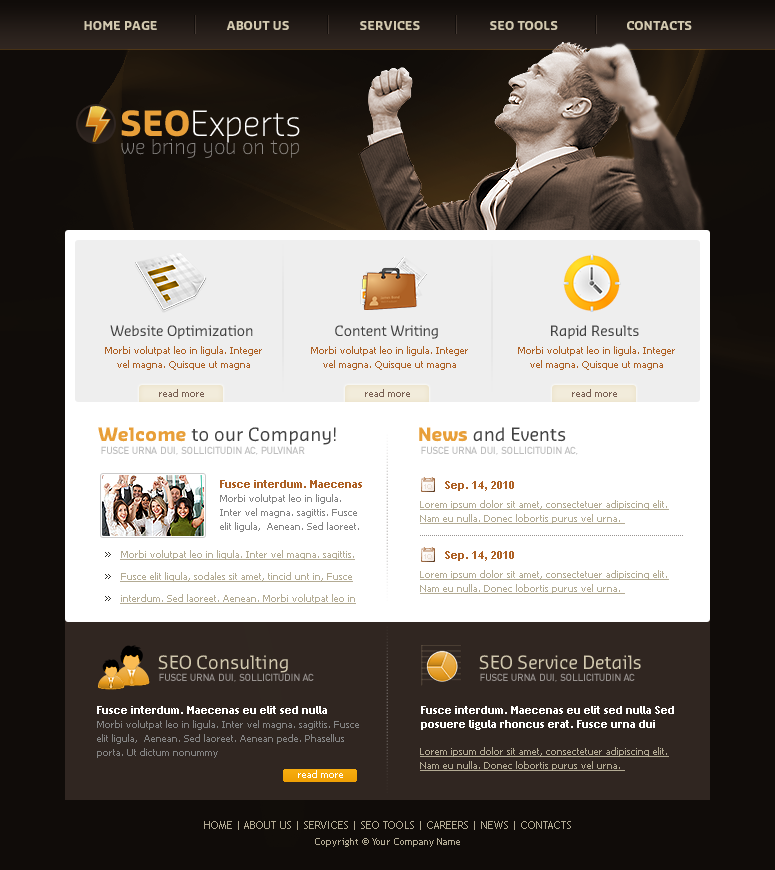
<style>
.page{position:relative;width:775px;height:870px;background:#ffffff}
.page>*{position:absolute;margin:0}
.t1{font:12px "Sansa-Bold";color:#d2c9af}
.t2{font:34px "Sansa-Light";color:#ffffff}
.t3{font:34px "Sansa-Bold";color:#e89f39}
.t4{font:20px "Sansa-Light";color:#8a8785}
.t5{font:14px "Sansa-Normal";color:#424242}
.t6{font:10px/14px "Tahoma";color:#ae6125}
.t7{font:10px "Tahoma";color:#7a6154}
.t8{font:18px "Sansa-Normal";color:#424242}
.t9{font:18px "Sansa-Bold";color:#e89f39}
.t10{font:10px "DINMittelschriftStd";color:#bdbdbd;text-transform:uppercase}
.t11{font:10px/14px "Tahoma";color:#848484}
.t12{font:11px/14px "TrebuchetMS-Bold";color:#ae6125}
.t13{font:11px "TrebuchetMS-Bold";color:#ae6125}
.t14{font:10px/14px "Tahoma";color:#b3ab94;text-decoration:underline}
.t15{font:10px/22px "Tahoma";color:#b3ab94;text-decoration:underline}
.t16{font:18px "Sansa-Normal";color:#d2c9af}
.t17{font:10px "DINMittelschriftStd";color:#989390;text-transform:uppercase}
.t18{font:11px/14px "TrebuchetMS-Bold";color:#ffffff}
.t19{font:10px "Tahoma";color:#ffffff}
.t20{font:11px/16px "TrebuchetMS";color:#b3ab94}
.t21{font:10px/16px "TrebuchetMS";color:#b3ab94}
</style>
<div class="page">
<p class="t1" style="left:84px;top:21px;width:73px;height:9px">HOME PAGE</p>
<p class="t1" style="left:226px;top:21px;width:63px;height:9px">ABOUT US</p>
<p class="t1" style="left:360px;top:21px;width:60px;height:9px">SERVICES</p>
<p class="t1" style="left:490px;top:21px;width:68px;height:9px">SEO TOOLS</p>
<p class="t1" style="left:627px;top:21px;width:65px;height:9px">CONTACTS</p>
<p class="t2" style="left:121px;top:110px;width:179px;height:33px"><span class="t3">SEO</span>Experts</p>
<p class="t4" style="left:121px;top:139px;width:178px;height:19px">we bring you on top</p>
<p class="t5" style="left:110px;top:325px;width:143px;height:14px">Website Optimization</p>
<p class="t5" style="left:335px;top:325px;width:103px;height:14px">Content Writing</p>
<p class="t5" style="left:551px;top:325px;width:88px;height:14px">Rapid Results</p>
<p class="t6" style="left:105px;top:346px;width:157px;height:24px;text-align:center">Morbi volutpat leo in ligula. Integer vel magna. Quisque ut magna</p>
<p class="t6" style="left:311px;top:346px;width:157px;height:24px;text-align:center">Morbi volutpat leo in ligula. Integer vel magna. Quisque ut magna</p>
<p class="t6" style="left:518px;top:346px;width:157px;height:24px;text-align:center">Morbi volutpat leo in ligula. Integer vel magna. Quisque ut magna</p>
<p class="t7" style="left:159px;top:389px;width:45px;height:8px">read more</p>
<p class="t7" style="left:365px;top:389px;width:45px;height:8px">read more</p>
<p class="t7" style="left:572px;top:389px;width:45px;height:8px">read more</p>
<p class="t8" style="left:98px;top:427px;width:238px;height:18px"><span class="t9">Welcome </span>to our Company!</p>
<p class="t8" style="left:419px;top:427px;width:147px;height:15px"><span class="t9">News </span>and Events</p>
<p class="t10" style="left:101px;top:446px;width:204px;height:9px">Fusce urna dui, sollicitudin ac, pulvinar</p>
<p class="t10" style="left:421px;top:446px;width:157px;height:9px">Fusce urna dui, sollicitudin ac,</p>
<p class="t11" style="left:220px;top:480px;width:142px;height:52px"><span class="t12">Fusce interdum. Maecenas </span>Morbi volutpat leo in ligula. Inter vel magna. sagittis. Fusce elit ligula,  Aenean. Sed laoreet.</p>
<p class="t13" style="left:445px;top:481px;width:69px;height:10px">Sep. 14, 2010</p>
<p class="t14" style="left:420px;top:500px;width:249px;height:24px">Lorem ipsum dolor sit amet, consectetuer adipiscing elit. Nam eu nulla. Donec lobortis purus vel urna.</p>
<p class="t15" style="left:120px;top:550px;width:236px;height:54px">Morbi volutpat leo in ligula. Inter vel magna. sagittis. Fusce elit ligula, sodales sit amet, tincid unt in, Fusce interdum. Sed laoreet. Aenean. Morbi volutpat leo in</p>
<p class="t13" style="left:445px;top:551px;width:69px;height:10px">Sep. 14, 2010</p>
<p class="t14" style="left:420px;top:570px;width:249px;height:24px">Lorem ipsum dolor sit amet, consectetuer adipiscing elit. Nam eu nulla. Donec lobortis purus vel urna.</p>
<p class="t16" style="left:158px;top:655px;width:130px;height:18px">SEO Consulting</p>
<p class="t16" style="left:479px;top:655px;width:162px;height:15px">SEO Service Details</p>
<p class="t17" style="left:159px;top:673px;width:155px;height:9px">Fusce urna dui, sollicitudin ac</p>
<p class="t17" style="left:480px;top:673px;width:155px;height:9px">Fusce urna dui, sollicitudin ac</p>
<p class="t11" style="left:97px;top:706px;width:262px;height:52px"><span class="t18">Fusce interdum. Maecenas eu elit sed nulla <br></span>Morbi volutpat leo in ligula. Inter vel magna. sagittis. Fusce elit ligula,  Aenean. Sed laoreet. Aenean pede. Phasellus porta. Ut dictum nonummy</p>
<p class="t18" style="left:421px;top:706px;width:253px;height:24px">Fusce interdum. Maecenas eu elit sed nulla Sed posuere ligula rhoncus erat. Fusce urna dui</p>
<p class="t14" style="left:420px;top:747px;width:249px;height:24px">Lorem ipsum dolor sit amet, consectetuer adipiscing elit. Nam eu nulla. Donec lobortis purus vel urna.</p>
<p class="t19" style="left:298px;top:770px;width:45px;height:8px">read more</p>
<p class="t20" style="left:204px;top:821px;width:367px;height:26px;text-align:center">HOME | ABOUT US | SERVICES | SEO TOOLS | CAREERS | NEWS | CONTACTS<br><span class="t21">Copyright © Your Company Name</span></p>
</div>
